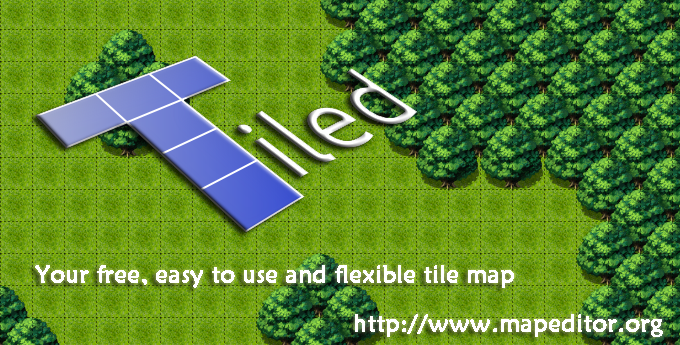
<style>
.page{position:relative;width:680px;height:345px}
.page>*{position:absolute;margin:0}
.t1{font:24px "STXinwei";color:#ffffff;font-weight:bold}
</style>
<div class="page">
<p class="t1" style="left:35px;top:265px;width:479px;height:23px">Your free, easy to use and flexible tile map editor.</p>
<p class="t1" style="left:355px;top:314px;width:308px;height:23px">http://www.mapeditor.org</p>
</div>
